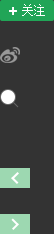
<style>
.page{position:relative;width:54px;height:234px;background:#333333}
.page>*{position:absolute;margin:0}
.t1{font:12px "SimSun";color:#ffffff}
</style>
<div class="page">
<p class="t1" style="left:22px;top:4px;width:23px;height:12px">关注</p>
</div>
